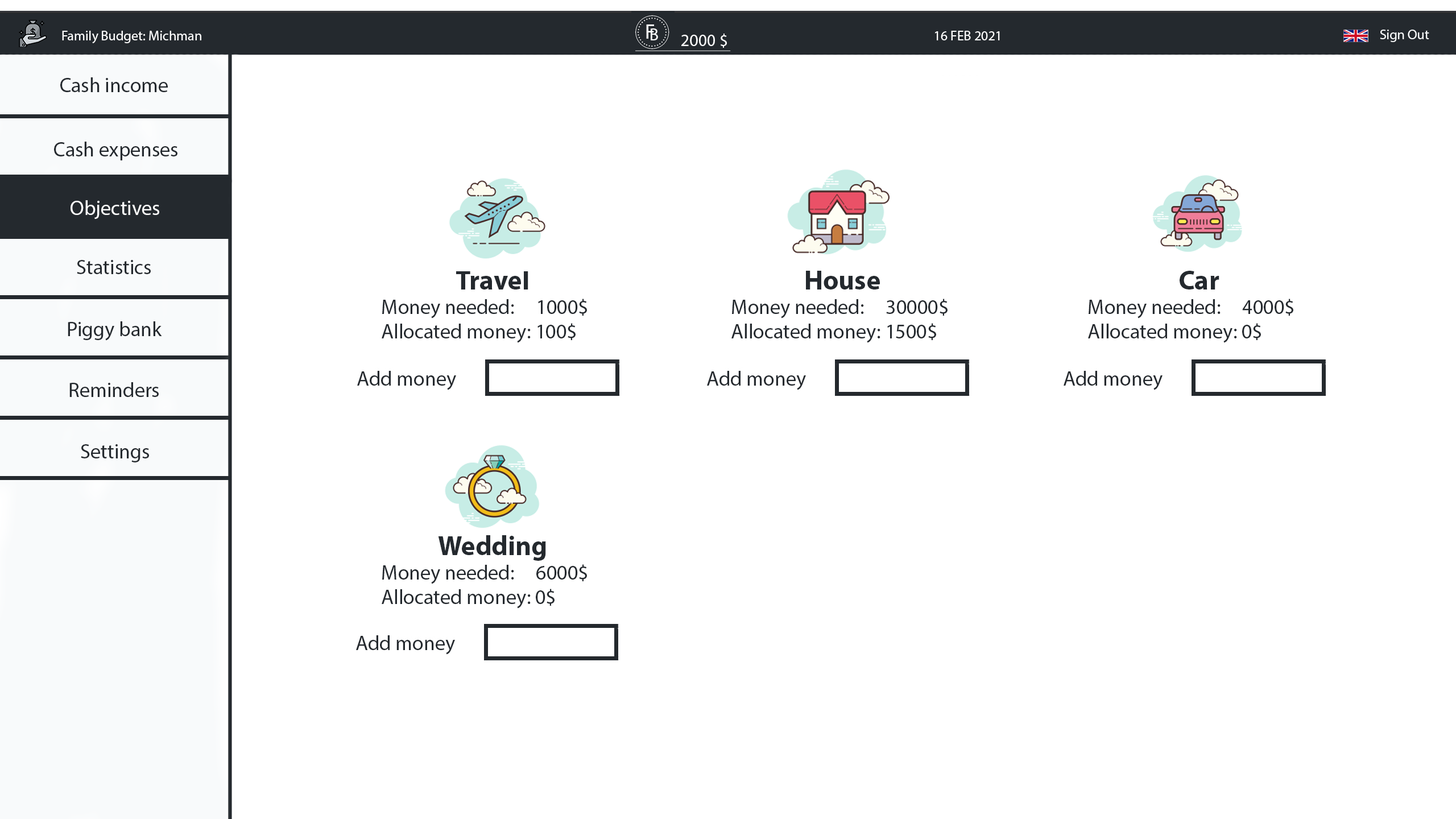
<style>
.page{position:relative;width:1456px;height:819px;background:#ffffff}
.page>*{position:absolute;margin:0}
.t1{font:13.6px "MyriadPro-Regular";color:#f8fafb}
.t2{font:13.6px "MyriadPro-Regular";color:#ffffff}
.t3{font:17.1px "MyriadPro-Regular";color:#ffffff}
.t4{font:20.5px "MyriadPro-Regular";color:#24292e}
.t5{font:20.5px "MyriadPro-Regular";color:#ffffff}
.t6{font:27.3px "MyriadPro-Bold";color:#24292e}
</style>
<div class="page">
<p class="t1" style="left:1380px;top:30px;width:49px;height:12px">Sign Out</p>
<p class="t2" style="left:62px;top:31px;width:139px;height:12px">Family Budget: Michman</p>
<p class="t3" style="left:681px;top:34px;width:46px;height:14px">2000 $</p>
<p class="t2" style="left:935px;top:31px;width:65px;height:9px">16 FEB 2021</p>
<p class="t4" style="left:60px;top:77px;width:108px;height:15px">Cash income</p>
<p class="t4" style="left:54px;top:142px;width:123px;height:18px">Cash expenses</p>
<p class="t5" style="left:71px;top:200px;width:88px;height:19px">Objectives</p>
<p class="t4" style="left:77px;top:260px;width:74px;height:14px">Statistics</p>
<p class="t4" style="left:382px;top:270px;width:205px;height:73px;text-align:center"><span class="t6">Travel<br></span>Money needed:     1000$<br>Allocated money: 100$<br><br>Allocated money</p>
<p class="t4" style="left:731px;top:271px;width:217px;height:72px;text-align:center"><span class="t6">House<br></span>Money needed:     30000$<br>Allocated money: 1500$<br><br>Allocated money</p>
<p class="t4" style="left:1088px;top:271px;width:205px;height:72px;text-align:center"><span class="t6">Car<br></span>Money needed:     4000$<br>Allocated money: 0$<br><br>Allocated money</p>
<p class="t4" style="left:68px;top:321px;width:94px;height:20px">Piggy bank</p>
<p class="t4" style="left:69px;top:382px;width:90px;height:15px">Reminders</p>
<p class="t4" style="left:81px;top:444px;width:68px;height:18px">Settings</p>
<p class="t4" style="left:382px;top:535px;width:205px;height:74px;text-align:center"><span class="t6">Wedding<br></span>Money needed:     6000$<br>Allocated money: 0$<br><br>Allocated money</p>
</div>
